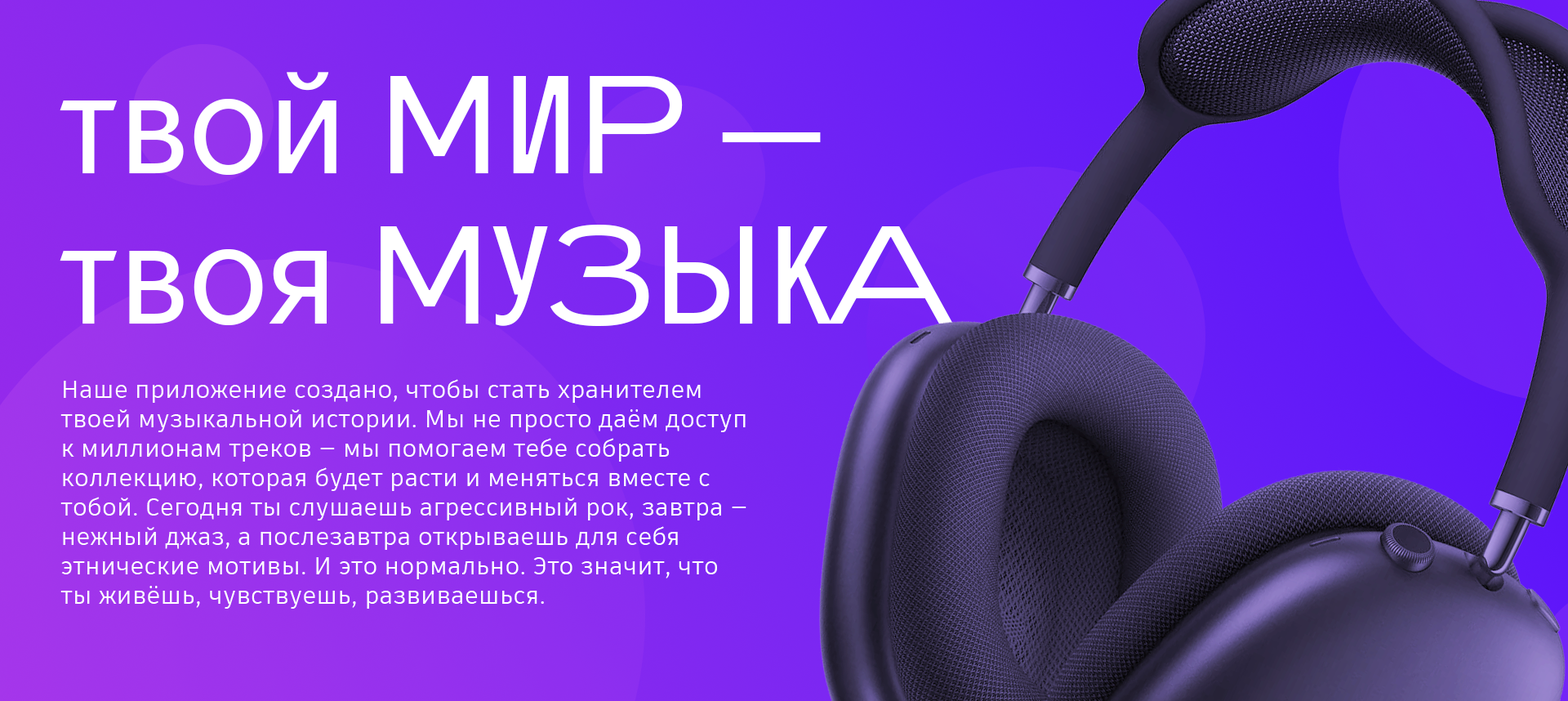
<style>
.page{position:relative;width:1568px;height:701px}
.page>*{position:absolute;margin:0}
.t1{font:136.4px/150.3px "Spell";letter-spacing:0.01em;color:#ffffff}
.t2{font:24.5px "ArtifaktElement-Regular";letter-spacing:0.01em;color:#ffffff}
</style>
<div class="page">
<p class="t1" style="left:60px;top:72px;width:893px;height:254px">твой МИР —<br>твоя МУЗЫКА</p>
<p class="t2" style="left:60px;top:379px;width:686px;height:229px">Наше приложение создано, чтобы стать хранителем твоей музыкальной истории. Мы не просто даём доступ к миллионам треков — мы помогаем тебе собрать коллекцию, которая будет расти и меняться вместе с тобой. Сегодня ты слушаешь агрессивный рок, завтра — нежный джаз, а послезавтра открываешь для себя этнические мотивы. И это нормально. Это значит, что ты живёшь, чувствуешь, развиваешься.</p>
</div>
